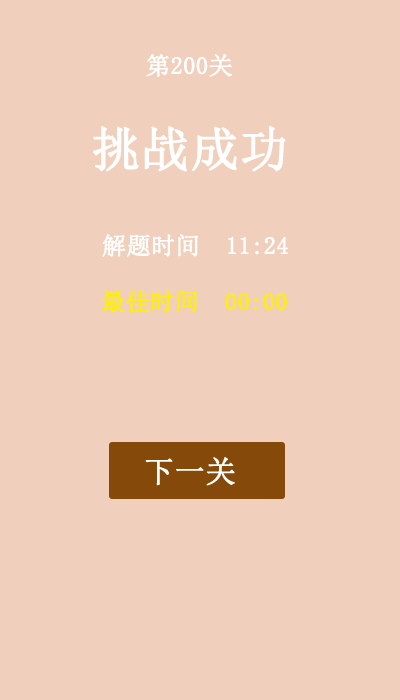
<style>
.page{position:relative;width:400px;height:700px;background:#f0d0bc}
.page>*{position:absolute;margin:0}
.t1{font:24px "SimSun";color:#ffffff;font-weight:bold}
.t2{font:48px "SimSun";color:#ffffff;font-weight:bold}
.t3{font:24px "SimSun";color:#fdef0a;font-weight:bold}
.t4{font:30px "SimSun";color:#ffffff;font-weight:bold}
</style>
<div class="page">
<p class="t1" style="left:146px;top:54px;width:86px;height:23px">第200关</p>
<p class="t2" style="left:93px;top:126px;width:193px;height:46px">挑战成功</p>
<p class="t1" style="left:102px;top:234px;width:186px;height:23px">解题时间  11:24</p>
<p class="t3" style="left:101px;top:290px;width:186px;height:23px">最佳时间  00:00</p>
<p class="t4" style="left:145px;top:457px;width:90px;height:29px">下一关</p>
</div>
